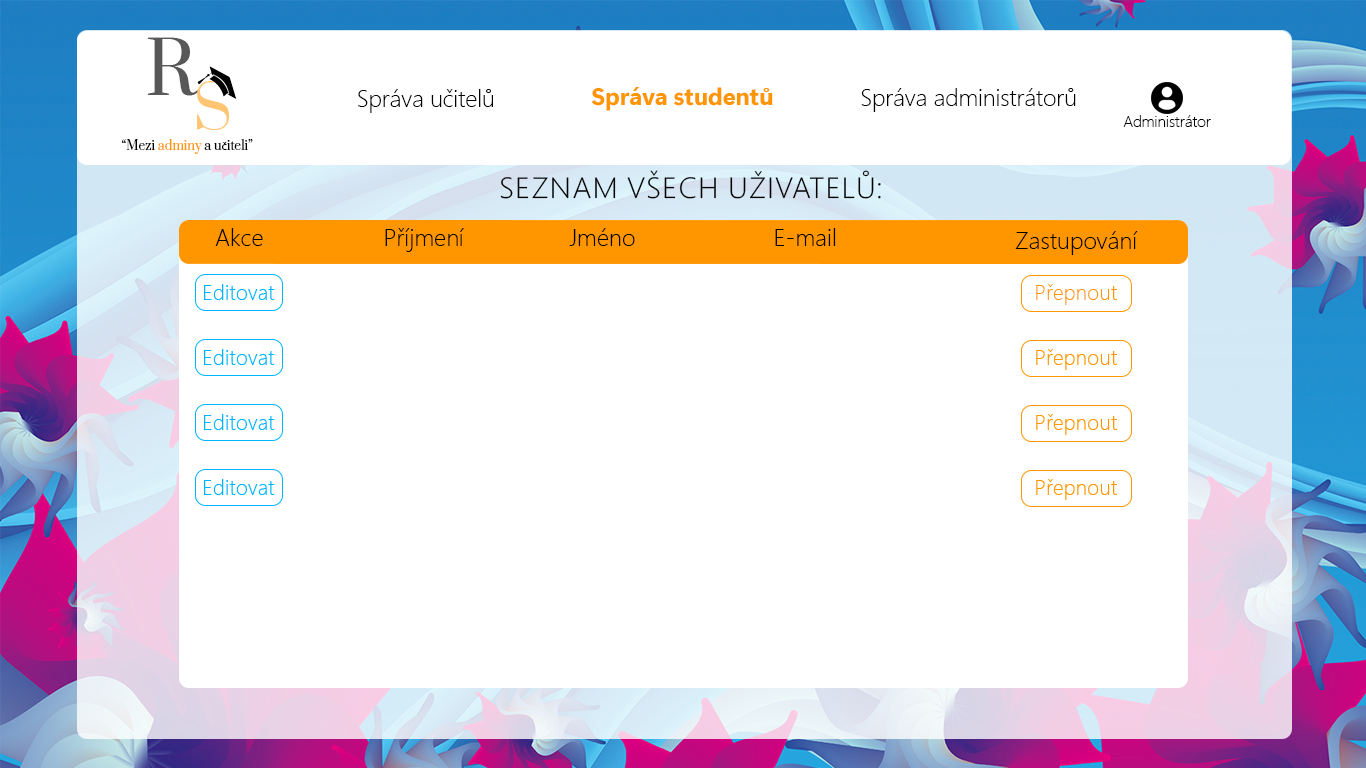
<style>
.page{position:relative;width:1366px;height:768px;background:#ffffff}
.page>*{position:absolute;margin:0}
.t1{font:71.6px "Prata-Regular";color:#585858}
.t2{font:59.2px "Prata-Regular";color:#ffc573}
.t3{font:23.7px "SegoeUI-Light";color:#000000}
.t4{font:23.7px "SegoeUIVariable-BoldDisplay";color:#ff9600}
.t5{font:15.5px "SegoeUI-Light";color:#000000}
.t6{font:12.1px "Prata-Regular";color:#ff9600}
.t7{font:12.1px "Prata-Regular";color:#000000}
.t8{font:12.1px "MyriadPro-Regular";color:#000000}
.t9{font:29.1px "SegoeUI-Light";color:#000000;text-transform:uppercase;scale:1.04 1}
.t10{font:24px "SegoeUI-Light";color:#000000}
.t11{font:21.5px "SegoeUI-Light";color:#ff9600}
</style>
<div class="page">
<p class="t1" style="left:147px;top:37px;width:52px;height:59px">R</p>
<p class="t2" style="left:197px;top:81px;width:33px;height:49px">S</p>
<p class="t3" style="left:358px;top:89px;width:135px;height:24px">Správa učitelů</p>
<p class="t4" style="left:591px;top:87px;width:182px;height:24px">Správa studentů</p>
<p class="t3" style="left:861px;top:88px;width:215px;height:24px">Správa administrátorů</p>
<p class="t5" style="left:1123px;top:115px;width:88px;height:12px">Administrátor</p>
<p class="t6" style="left:121px;top:139px;width:132px;height:15px"><span class="t7">“Mezi </span>adminy <span class="t7">a u</span><span class="t8">č</span><span class="t7">iteli”</span></p>
<p class="t9" style="left:500px;top:170px;width:381px;height:29px">Seznam všech UŽIVATELŮ:</p>
<p class="t10" style="left:215px;top:228px;width:48px;height:18px">Akce</p>
<p class="t10" style="left:385px;top:228px;width:79px;height:24px">Příjmení</p>
<p class="t10" style="left:569px;top:228px;width:66px;height:18px">Jméno</p>
<p class="t10" style="left:775px;top:228px;width:61px;height:18px">E-mail</p>
<p class="t10" style="left:1015px;top:231px;width:123px;height:24px">Zastupování</p>
<p class="t11" style="left:1036px;top:284px;width:81px;height:21px">Přepnout</p>
</div>
